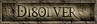
<style>
.page{position:relative;width:97px;height:24px}
.page>*{position:absolute;margin:0}
.t1{font:16px "Morpheus"}
</style>
<div class="page">
<p class="t1" style="left:16px;top:5px;width:64px;height:14px">Disolver</p>
</div>
